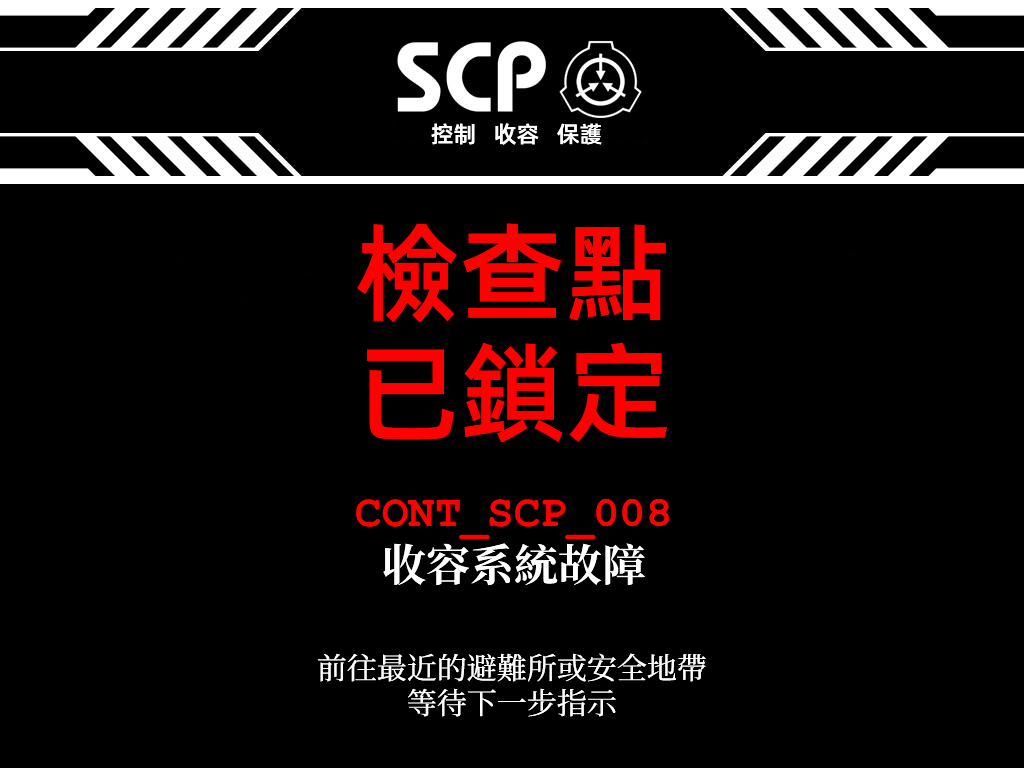
<style>
.page{position:relative;width:1024px;height:768px;background:#000000}
.page>*{position:absolute;margin:0}
.t1{font:23px "AlibabaPuHuiTiM";color:#ffffff}
.t2{font:107px/120px "AlibabaPuHuiTiM";color:#ff0000}
.t3{font:44px/55px "ContainmentBreach-Bold";color:#ff0000}
.t4{font:44px/55px "CourierNewPS-BoldMT";color:#ff0000}
.t5{font:44px/55px "ContainmentBreach-Bold";color:#ffffff}
.t6{font:30px/35px "ContainmentBreach-Regular";color:#ffffff}
</style>
<div class="page">
<p class="t1" style="left:431px;top:123px;width:171px;height:22px">控制   收容   保護</p>
<p class="t2" style="left:357px;top:223px;width:310px;height:220px">檢查點<br>已鎖定</p>
<p class="t3" style="left:356px;top:499px;width:313px;height:87px;text-align:center">CONT_SCP_<span class="t4">008<br></span><span class="t5">收容系統故障</span></p>
<p class="t6" style="left:317px;top:653px;width:389px;height:64px;text-align:center">前往最近的避難所或安全地帶<br>等待下一步指示</p>
</div>
